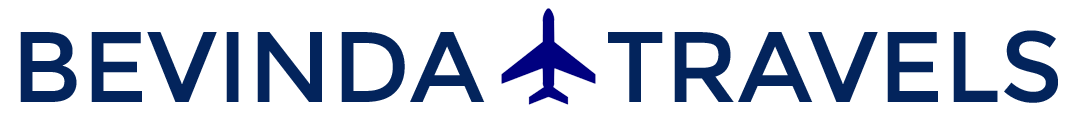
<style>
.page{position:relative;width:1082px;height:122px;background:#ffffff}
.page>*{position:absolute;margin:0}
.t1{font:100px "Montserrat-Regular";color:#03245c}
</style>
<div class="page">
<p class="t1" style="left:608px;top:30px;width:450px;height:73px">TRAVELS</p>
<p class="t1" style="left:20px;top:32px;width:465px;height:70px">BEVINDA</p>
</div>
